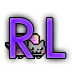
<style>
.page{position:relative;width:72px;height:72px;background:#ffffff}
.page>*{position:absolute;margin:0}
.t1{font:64px "TwCenMT-Regular";letter-spacing:0.075em}
</style>
<div class="page">
<p class="t1" style="left:10px;top:18px;width:56px;height:40px">RL</p>
</div>
